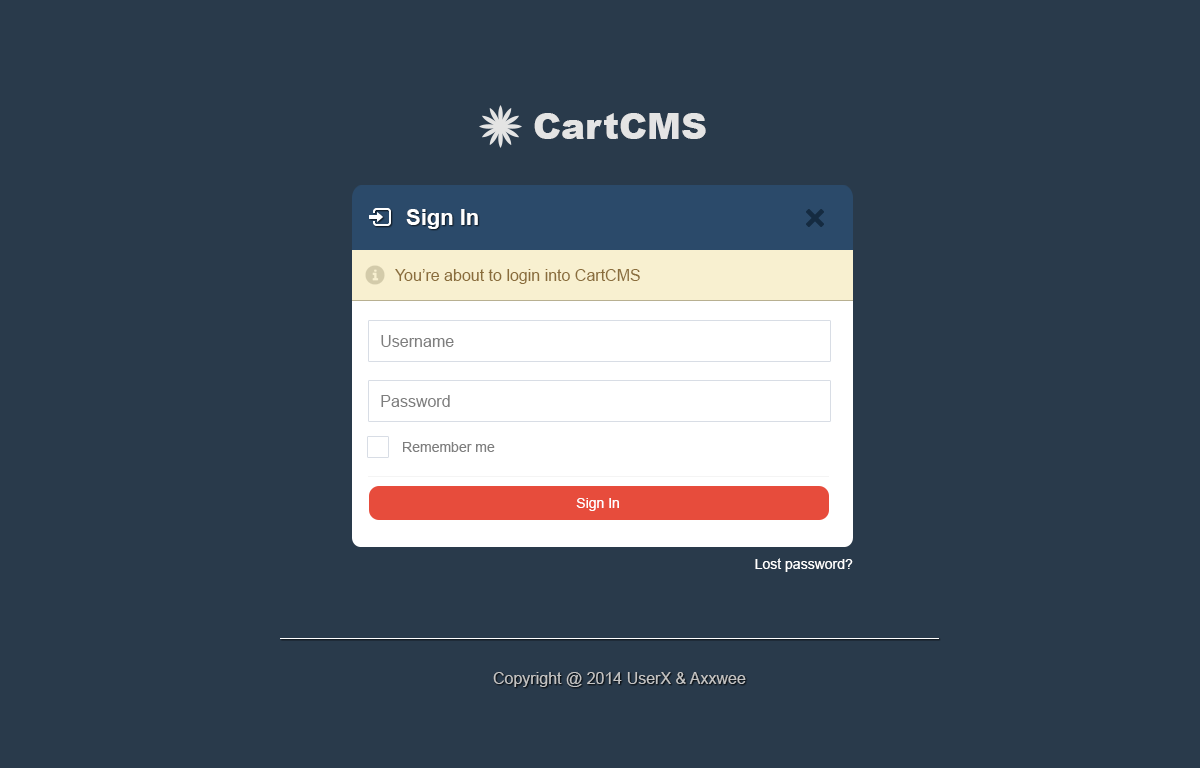
<style>
.page{position:relative;width:1200px;height:768px;background:#293a4b}
.page>*{position:absolute;margin:0}
.t1{font:36px "Arial-Black";color:#e4e4e4}
.t2{font:22px "Arial-BoldMT";color:#ffffff}
.t3{font:16px "ArialMT";color:#8a6d3b}
.t4{font:16px "ArialMT";color:#7e7e7e}
.t5{font:14px "ArialMT";color:#7e7e7e}
.t6{font:14px "ArialMT";color:#ffffff}
.t7{font:16px "ArialMT";color:#c4c4c4}
</style>
<div class="page">
<p class="t1" style="left:534px;top:113px;width:172px;height:26px">CartCMS</p>
<p class="t2" style="left:406px;top:209px;width:72px;height:20px">Sign In</p>
<p class="t3" style="left:395px;top:269px;width:245px;height:15px">You’re about to login into CartCMS</p>
<p class="t4" style="left:381px;top:335px;width:73px;height:12px">Username</p>
<p class="t4" style="left:381px;top:395px;width:69px;height:12px">Password</p>
<p class="t5" style="left:403px;top:442px;width:92px;height:10px">Remember me</p>
<p class="t6" style="left:576px;top:498px;width:43px;height:13px">Sign In</p>
<p class="t6" style="left:755px;top:558px;width:98px;height:14px">Lost password?</p>
<p class="t7" style="left:493px;top:672px;width:253px;height:15px">Copyright @ 2014 UserX &amp; Axxwee</p>
</div>
